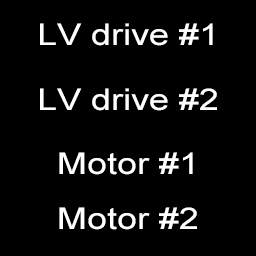
<style>
.page{position:relative;width:256px;height:256px;background:#000000}
.page>*{position:absolute;margin:0}
.t1{font:30px "ArialMT";color:#ffffff;scale:1.2 1}
</style>
<div class="page">
<p class="t1" style="left:40px;top:23px;width:173px;height:23px">LV drive #1</p>
<p class="t1" style="left:40px;top:88px;width:177px;height:23px">LV drive #2</p>
<p class="t1" style="left:59px;top:152px;width:134px;height:23px">Motor #1</p>
<p class="t1" style="left:59px;top:207px;width:138px;height:23px">Motor #2</p>
</div>
